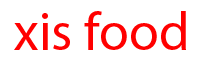
<style>
.page{position:relative;width:200px;height:62px;background:#ffffff}
.page>*{position:absolute;margin:0}
.t1{font:54px "MyriadPro-Regular";color:#ff0000}
</style>
<div class="page">
<p class="t1" style="left:14px;top:11px;width:172px;height:39px">xis food</p>
</div>
